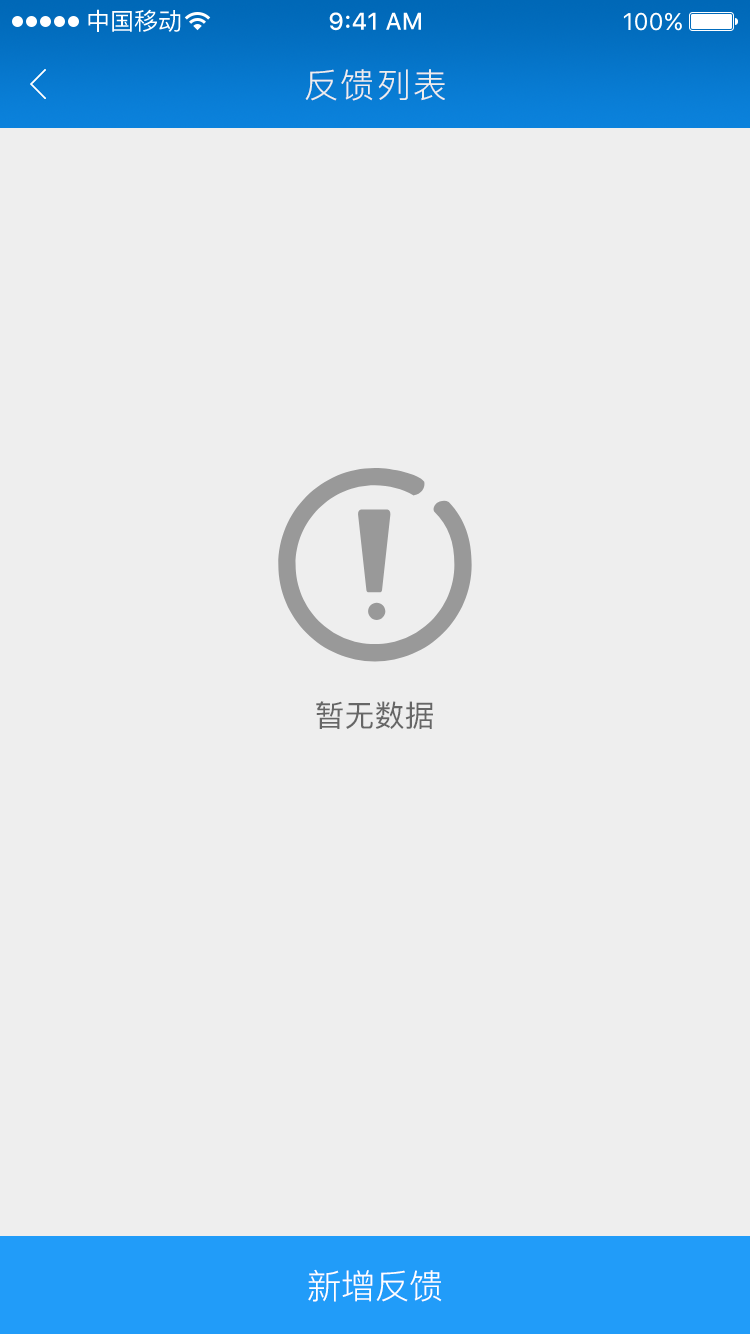
<style>
.page{position:relative;width:750px;height:1334px;background:#eeeeee}
.page>*{position:absolute;margin:0}
.t1{font:34px "PingFang-SC-Regular";letter-spacing:0.06em;color:#eeeeee}
.t2{font:30px "PingFang-SC-Medium";color:#666666}
.t3{font:34px "PingFang-SC-Regular";color:#ffffff}
</style>
<div class="page">
<p class="t1" style="left:305px;top:69px;width:140px;height:32px">反馈列表</p>
<p class="t2" style="left:316px;top:701px;width:117px;height:28px">暂无数据</p>
<p class="t3" style="left:308px;top:1269px;width:134px;height:33px">新增反馈</p>
</div>
